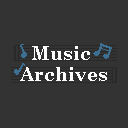
<style>
.page{position:relative;width:128px;height:128px;background:#333333}
.page>*{position:absolute;margin:0}
.t1{font:19px/21px "CenturySchoolbook-Bold";color:#ffffff}
</style>
<div class="page">
<p class="t1" style="left:20px;top:46px;width:87px;height:35px;text-align:center">Music <br>Archives</p>
</div>
